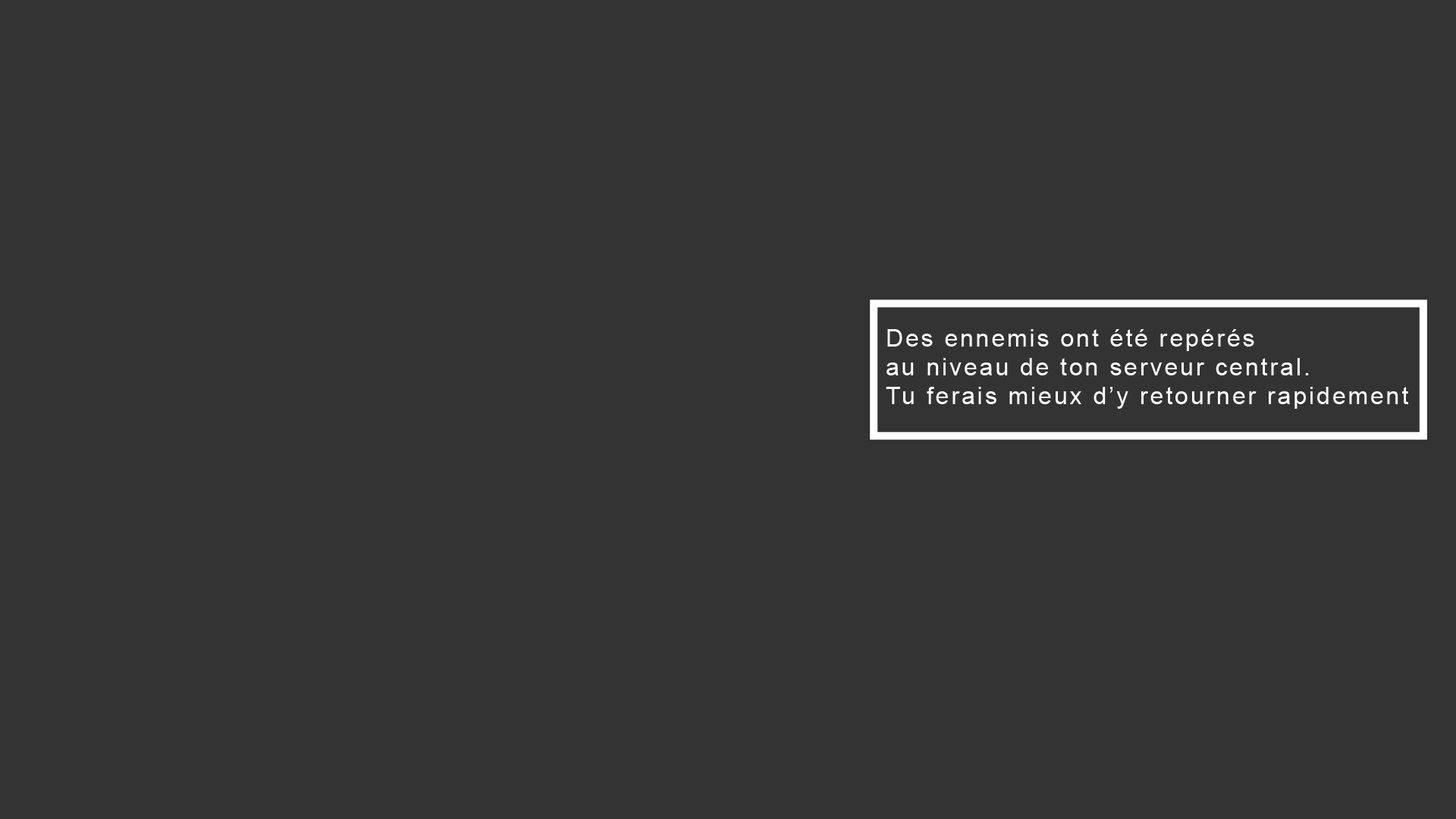
<style>
.page{position:relative;width:1456px;height:819px;background:#333333}
.page>*{position:absolute;margin:0}
.t1{font:23.9px "ArialMT";letter-spacing:0.1em;color:#ffffff}
</style>
<div class="page">
<p class="t1" style="left:886px;top:329px;width:522px;height:80px">Des ennemis ont été repérés<br>au niveau de ton serveur central.<br>Tu ferais mieux d’y retourner rapidement</p>
</div>
